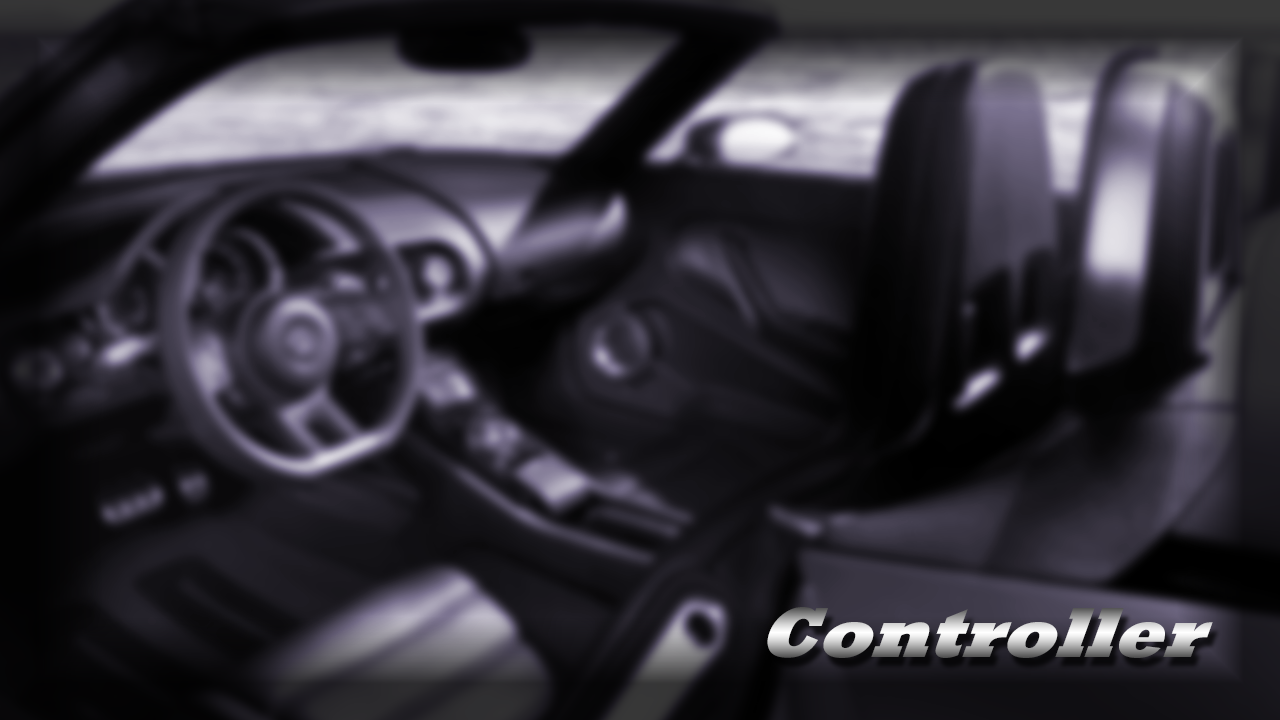
<style>
.page{position:relative;width:1280px;height:720px}
.page>*{position:absolute;margin:0}
.t1{font:76.6px "Rockwell-ExtraBold";scale:0.94 1}
</style>
<div class="page">
<p class="t1" style="left:767px;top:607px;width:446px;height:51px">Controller</p>
</div>
